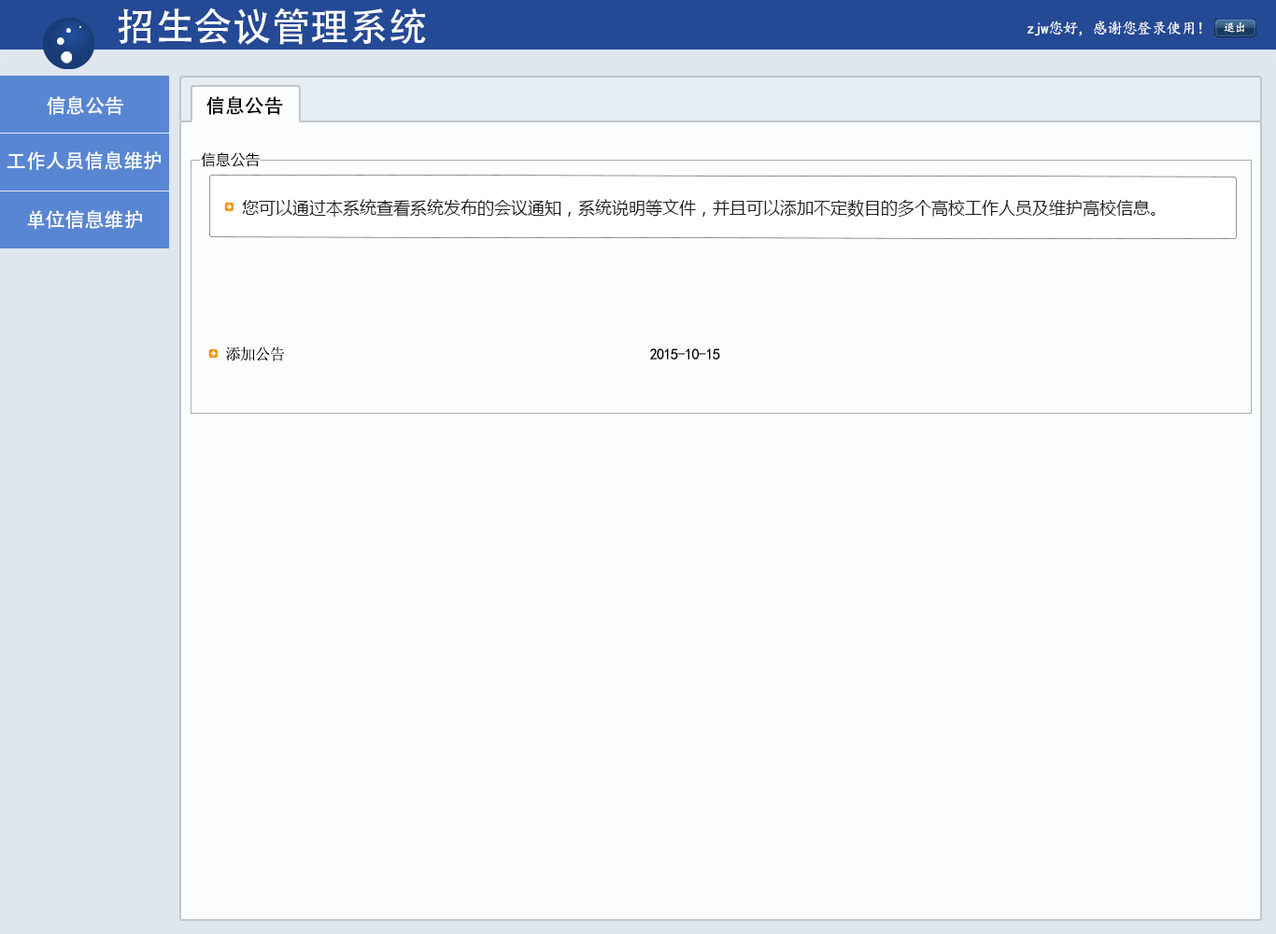
<style>
.page{position:relative;width:1276px;height:934px;background:#fbfdfe}
.page>*{position:absolute;margin:0}
.t1{font:38.9px "AdobeHeitiStd-Regular";color:#ffffff}
.t2{font:15.6px "KaiTi";letter-spacing:-0.05em;color:#ffffff}
.t3{font:11.7px "KaiTi";letter-spacing:-0.05em;color:#ffffff}
.t4{font:19.5px "AdobeHeitiStd-Regular";color:#fefefe}
.t5{font:19.5px "AdobeHeitiStd-Regular";color:#000000}
.t6{font:15.6px "MicrosoftJhengHeiRegular";letter-spacing:-0.05em;color:#000000}
.t7{font:16.8px "MicrosoftYaHei";color:#1e1f20}
.t8{font:15.6px "SimSun";letter-spacing:-0.05em;color:#000000}
.t9{font:15.6px "KaiTi";letter-spacing:-0.05em;color:#000000}
</style>
<div class="page">
<p class="t1" style="left:118px;top:7px;width:308px;height:38px">招生会议管理系统</p>
<p class="t2" style="left:1028px;top:21px;width:174px;height:15px">zjw您好，感谢您登录使用！</p>
<p class="t3" style="left:1224px;top:22px;width:21px;height:11px">退出</p>
<p class="t4" style="left:47px;top:96px;width:77px;height:19px">信息公告</p>
<p class="t5" style="left:206px;top:96px;width:77px;height:19px">信息公告</p>
<p class="t4" style="left:7px;top:151px;width:155px;height:19px">工作人员信息维护</p>
<p class="t6" style="left:201px;top:152px;width:59px;height:15px">信息公告</p>
<p class="t7" style="left:242px;top:199px;width:914px;height:18px">您可以通过本系统查看系统发布的会议通知，系统说明等文件，并且可以添加不定数目的多个高校工作人员及维护高校信息。</p>
<p class="t4" style="left:27px;top:210px;width:115px;height:20px">单位信息维护</p>
<p class="t8" style="left:226px;top:347px;width:59px;height:15px">添加公告</p>
<p class="t9" style="left:649px;top:348px;width:71px;height:12px">2015-10-15</p>
</div>
